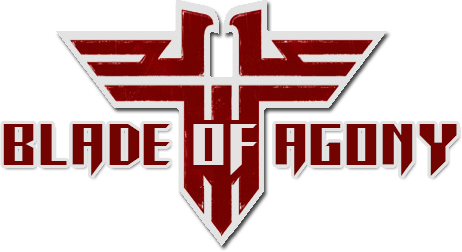
<style>
.page{position:relative;width:462px;height:252px;background:#ffffff}
.page>*{position:absolute;margin:0}
.t1{font:73.6px "RETURNTOCASTLE";letter-spacing:-0.006em;color:#730301}
.t2{font:73.6px "RETURNTOCASTLE";letter-spacing:-0.006em;color:#e6e2e1}
</style>
<div class="page">
<p class="t1" style="left:3px;top:124px;width:454px;height:52px">BLADE       AGONY</p>
<p class="t2" style="left:193px;top:124px;width:64px;height:51px">OF</p>
</div>
